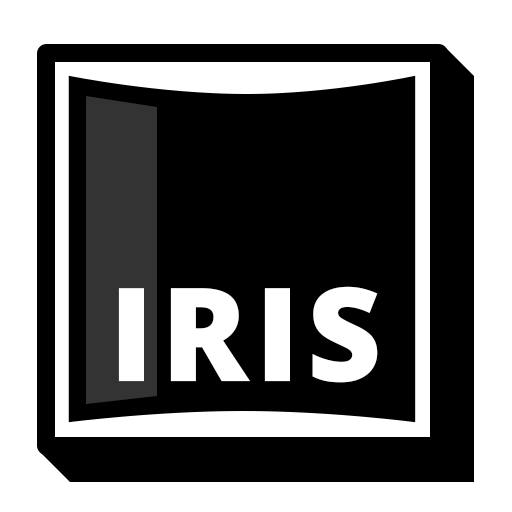
<style>
.page{position:relative;width:512px;height:512px;background:#000000}
.page>*{position:absolute;margin:0}
.t1{font:129.8px "OpenSans-Extrabold";letter-spacing:0.05em;color:#ffffff;text-transform:uppercase}
</style>
<div class="page">
<p class="t1" style="left:118px;top:286px;width:260px;height:97px">IRIS</p>
</div>
